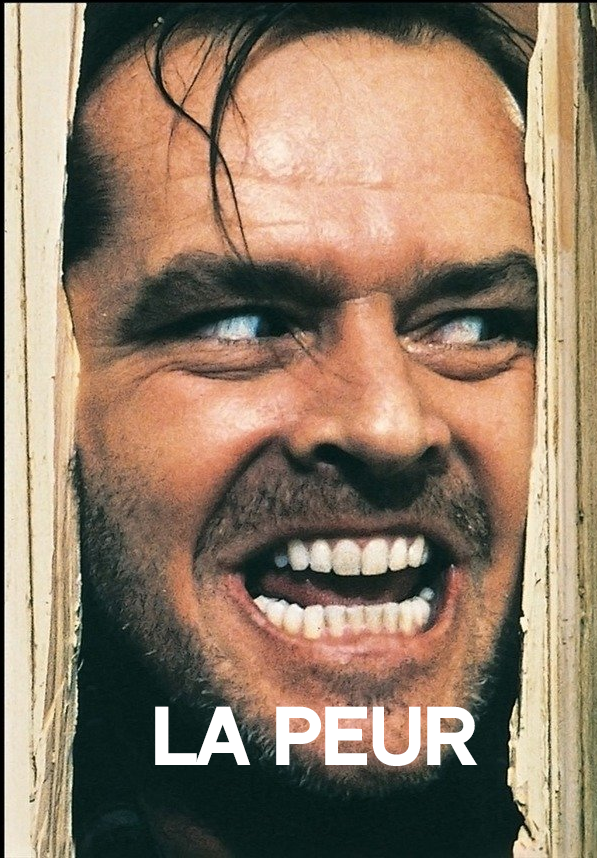
<style>
.page{position:relative;width:597px;height:858px}
.page>*{position:absolute;margin:0}
.t1{font:71.9px "NeutralFaceBold";letter-spacing:0.005em;color:#ffffff}
</style>
<div class="page">
<p class="t1" style="left:155px;top:706px;width:323px;height:60px">la peur</p>
</div>
